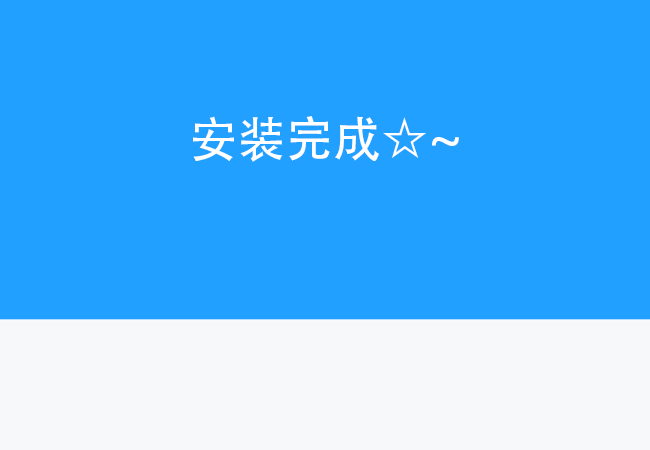
<style>
.page{position:relative;width:650px;height:450px;background:#21a0ff}
.page>*{position:absolute;margin:0}
.t1{font:48px "AdobeHeitiStd-Regular";color:#ffffff}
</style>
<div class="page">
<p class="t1" style="left:193px;top:116px;width:266px;height:46px">安装完成☆~</p>
</div>
